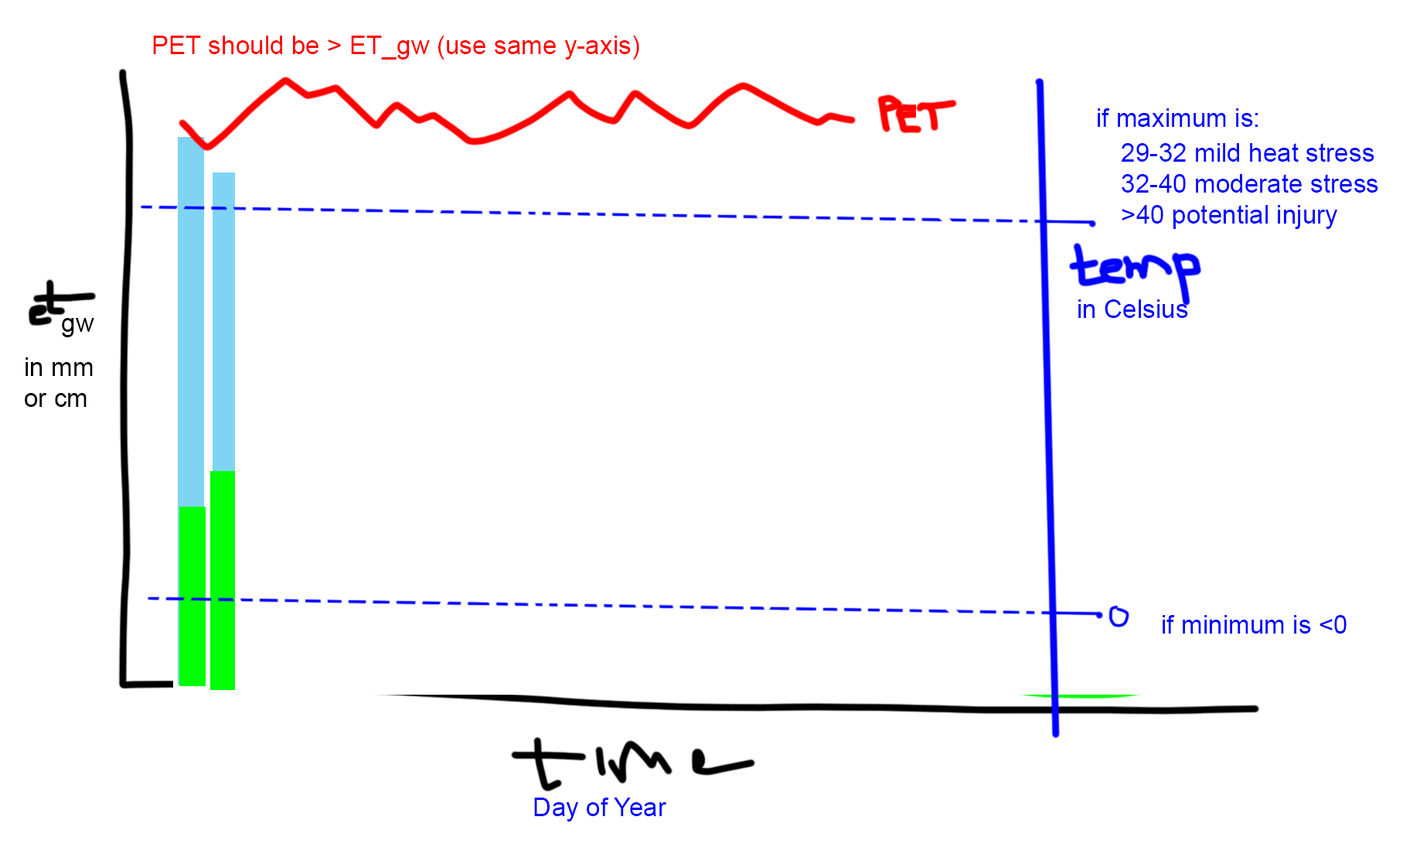
<style>
.page{position:relative;width:1413px;height:844px;background:#ffffff}
.page>*{position:absolute;margin:0}
.t1{font:25.8px "ArialMT";color:#ff0000}
.t2{font:25.8px "ArialMT";color:#0000ff}
.t3{font:25.8px "ArialMT";color:#000000}
</style>
<div class="page">
<p class="t1" style="left:153px;top:36px;width:486px;height:24px">PET should be &gt; ET_gw (use same y-axis)</p>
<p class="t2" style="left:1098px;top:108px;width:161px;height:19px">if maximum is:</p>
<p class="t2" style="left:1122px;top:143px;width:257px;height:86px">29-32 mild heat stress<br>32-40 moderate stress<br>&gt;40 potential injury</p>
<p class="t2" style="left:1079px;top:299px;width:109px;height:19px">in Celsius</p>
<p class="t3" style="left:62px;top:318px;width:32px;height:19px">gw</p>
<p class="t3" style="left:25px;top:357px;width:68px;height:50px">in mm<br>or cm</p>
<p class="t2" style="left:1163px;top:615px;width:184px;height:18px">if minimum is &lt;0</p>
<p class="t2" style="left:534px;top:797px;width:133px;height:24px">Day of Year</p>
</div>
